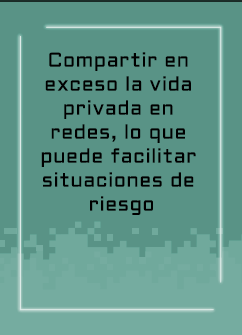
<style>
.page{position:relative;width:242px;height:335px;background:#599386}
.page>*{position:absolute;margin:0}
.t1{font:20px "Aldrich-Regular";letter-spacing:0.025em;color:#000000}
</style>
<div class="page">
<p class="t1" style="left:41px;top:52px;width:155px;height:163px;text-align:center">Compartir en <br>exceso la vida <br>privada en <br>redes, lo que <br>puede facilitar <br>situaciones de <br>riesgo</p>
</div>
